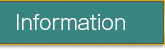
<style>
.page{position:relative;width:165px;height:50px;background:#378481}
.page>*{position:absolute;margin:0}
.t1{font:20px "GothicMB101Pro-Light";color:#fbfbf9}
</style>
<div class="page">
<p class="t1" style="left:17px;top:14px;width:108px;height:16px">Information</p>
</div>
